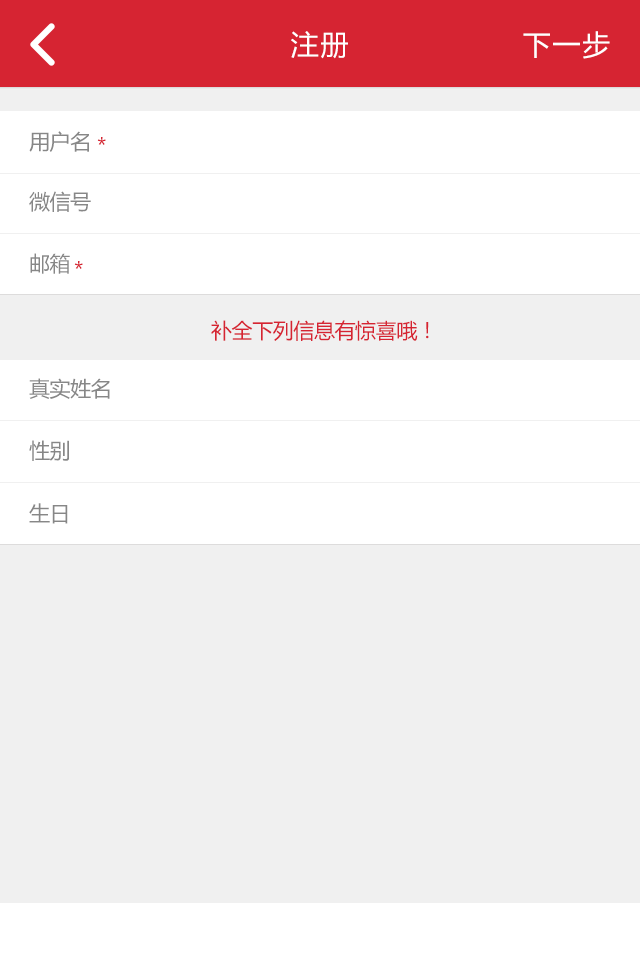
<style>
.page{position:relative;width:640px;height:960px;background:#f0f0f0}
.page>*{position:absolute;margin:0}
.t1{font:28px "MicrosoftYaHei";letter-spacing:0.06em;color:#ffffff}
.t2{font:21px "MicrosoftYaHei";letter-spacing:-0.02em;color:#878787}
.t3{font:21px "MicrosoftYaHei";letter-spacing:-0.02em;color:#d62432}
</style>
<div class="page">
<p class="t1" style="left:291px;top:31px;width:57px;height:28px">注册</p>
<p class="t1" style="left:523px;top:31px;width:87px;height:28px">下一步</p>
<p class="t2" style="left:29px;top:131px;width:60px;height:21px">用户名</p>
<p class="t3" style="left:97px;top:137px;width:9px;height:8px">*</p>
<p class="t2" style="left:29px;top:191px;width:62px;height:21px">微信号</p>
<p class="t2" style="left:30px;top:253px;width:40px;height:21px">邮箱</p>
<p class="t3" style="left:74px;top:261px;width:9px;height:8px">*</p>
<p class="t3" style="left:211px;top:320px;width:218px;height:21px">补全下列信息有惊喜哦！</p>
<p class="t2" style="left:29px;top:378px;width:81px;height:21px">真实姓名</p>
<p class="t2" style="left:29px;top:440px;width:40px;height:21px">性别</p>
<p class="t2" style="left:29px;top:503px;width:39px;height:21px">生日</p>
</div>
